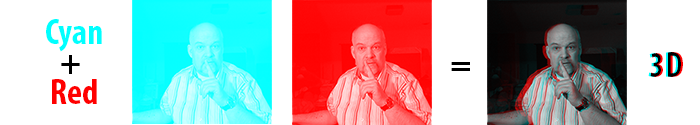
<style>
.page{position:relative;width:700px;height:125px;background:#ffffff}
.page>*{position:absolute;margin:0}
.t1{font:36px/30px "MyriadPro-BoldCond";color:#00ffff}
.t2{font:36px/30px "MyriadPro-BoldCond";color:#000000}
.t3{font:36px/30px "MyriadPro-BoldCond";color:#ff0000}
.t4{font:36px "MyriadPro-BoldCond"}
.t5{font:36px "MyriadPro-BoldCond";color:#000000}
</style>
<div class="page">
<p class="t1" style="left:46px;top:19px;width:56px;height:85px;text-align:center">Cyan<br><span class="t2">+ <br></span><span class="t3">Red</span></p>
<p class="t4" style="left:648px;top:52px;width:33px;height:25px">3D</p>
<p class="t4" style="left:650px;top:52px;width:33px;height:25px">3D</p>
<p class="t5" style="left:451px;top:62px;width:19px;height:9px">=</p>
</div>
